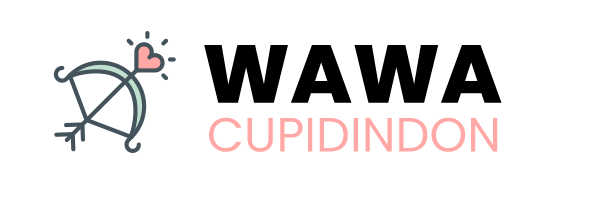
<style>
.page{position:relative;width:600px;height:200px;background:#ffffff}
.page>*{position:absolute;margin:0}
.t1{font:82px "Poppins-ExtraBold";color:#000000;text-transform:uppercase}
.t2{font:48px "Poppins-Regular";color:#ffa8a6;text-transform:uppercase}
</style>
<div class="page">
<p class="t1" style="left:204px;top:45px;width:298px;height:58px">WAWA</p>
<p class="t2" style="left:209px;top:117px;width:289px;height:35px">CUPIDINDON</p>
</div>
